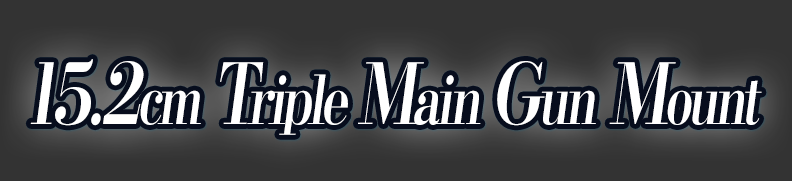
<style>
.page{position:relative;width:792px;height:181px;background:#333333}
.page>*{position:absolute;margin:0}
.t1{font:67.2px "KochoStd-Heavy";letter-spacing:-0.08em;color:#ffffff;font-style:italic;scale:0.76 1}
.t2{font:84px "KochoStd-Heavy";letter-spacing:-0.08em;color:#ffffff;font-style:italic;scale:0.76 1}
</style>
<div class="page">
<p class="t1" style="left:30px;top:59px;width:732px;height:76px"><span class="t2">15.2</span>cm <span class="t2">T</span>riple <span class="t2">M</span>ain <span class="t2">G</span>un<span class="t2"> M</span>ount</p>
</div>
